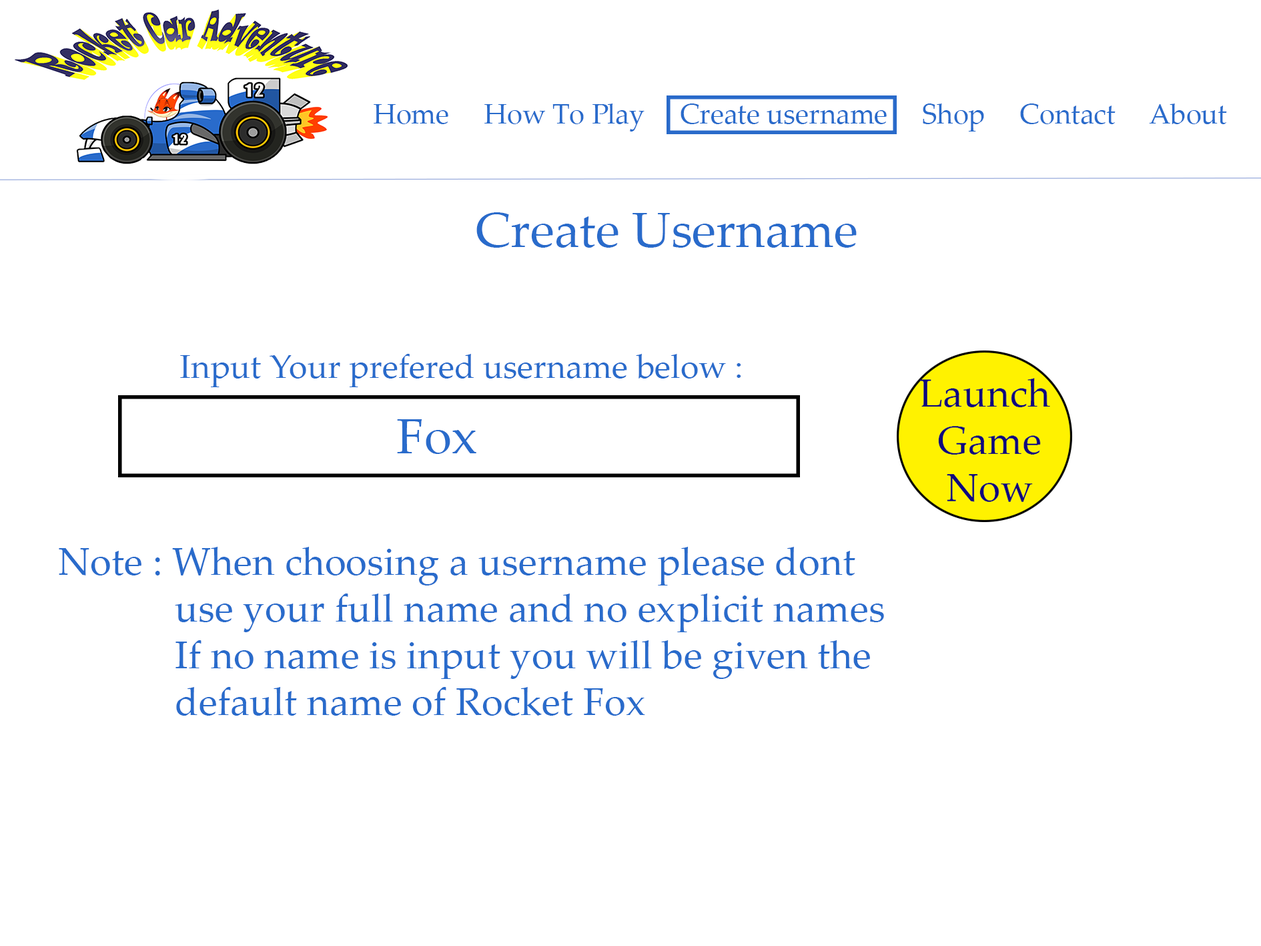
<style>
.page{position:relative;width:1261px;height:946px;background:#ffffff}
.page>*{position:absolute;margin:0}
.t1{font:27.8px "PalatinoLinotype-Roman";color:#296bcb}
.t2{font:50px "PalatinoLinotype-Roman";color:#296bcb}
.t3{font:33.4px "PalatinoLinotype-Roman";color:#296bcb}
.t4{font:38.9px "PalatinoLinotype-Roman";color:#296bcb}
</style>
<div class="page">
<p class="t1" style="left:374px;top:103px;width:853px;height:28px">Home     How To Play     Create username     Shop     Contact     About</p>
<p class="t2" style="left:476px;top:212px;width:381px;height:36px">Create Username</p>
<p class="t3" style="left:180px;top:354px;width:561px;height:33px">Input Your prefered username below :</p>
<p class="t2" style="left:397px;top:419px;width:79px;height:35px">Fox</p>
<p class="t4" style="left:59px;top:546px;width:825px;height:169px">Note : When choosing a username please dont<br>            use your full name and no explicit names<br>            If no name is input you will be given the <br>            default name of Rocket Fox</p>
</div>
